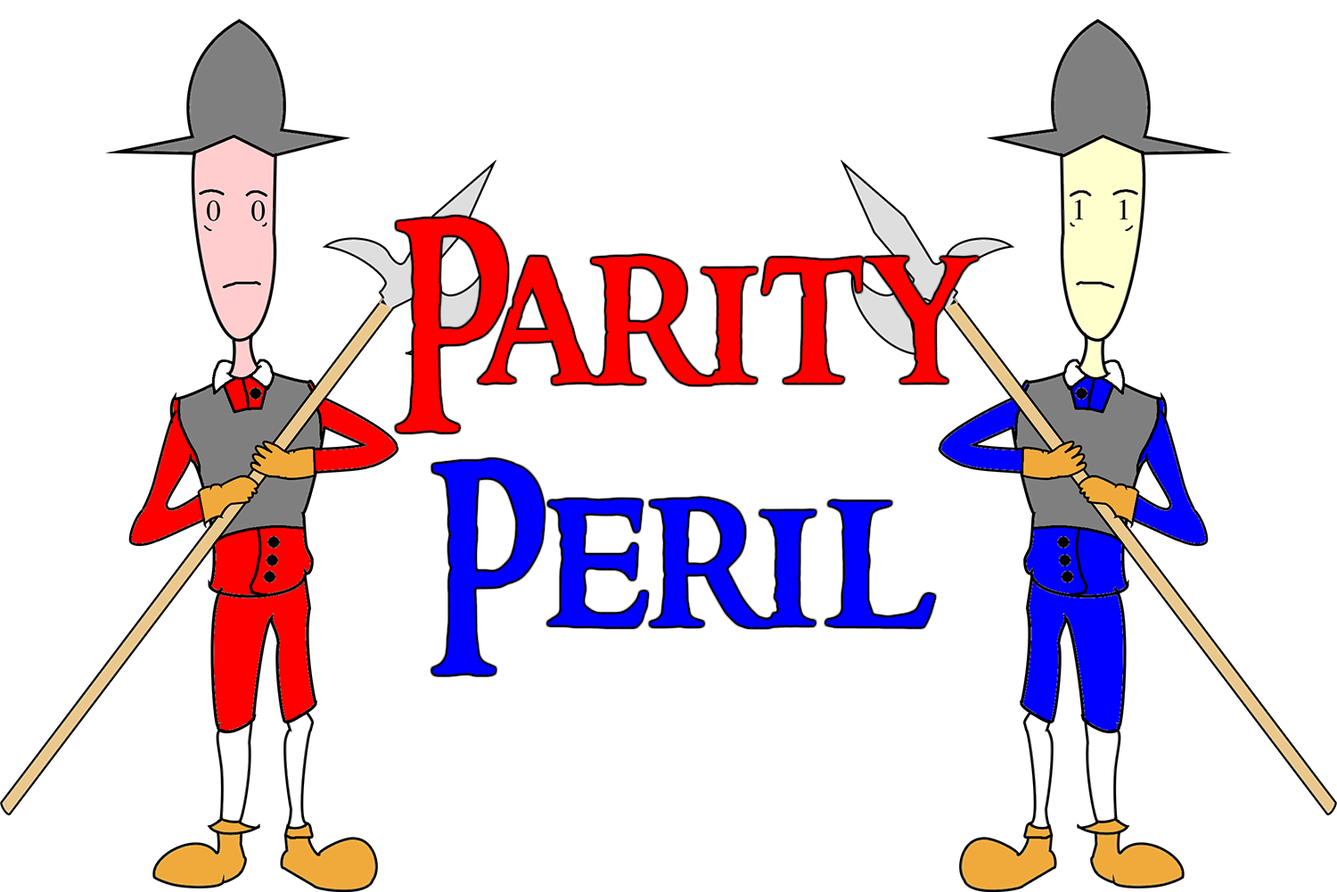
<style>
.page{position:relative;width:1337px;height:892px;background:#ffffff}
.page>*{position:absolute;margin:0}
.t1{font:202.1px "RingbearerMedium";color:#ff0000}
.t2{font:202.1px "RingbearerMedium";color:#0000ff}
</style>
<div class="page">
<p class="t1" style="left:396px;top:217px;width:582px;height:458px;text-align:center">Parity<br><span class="t2">Peril</span></p>
</div>
